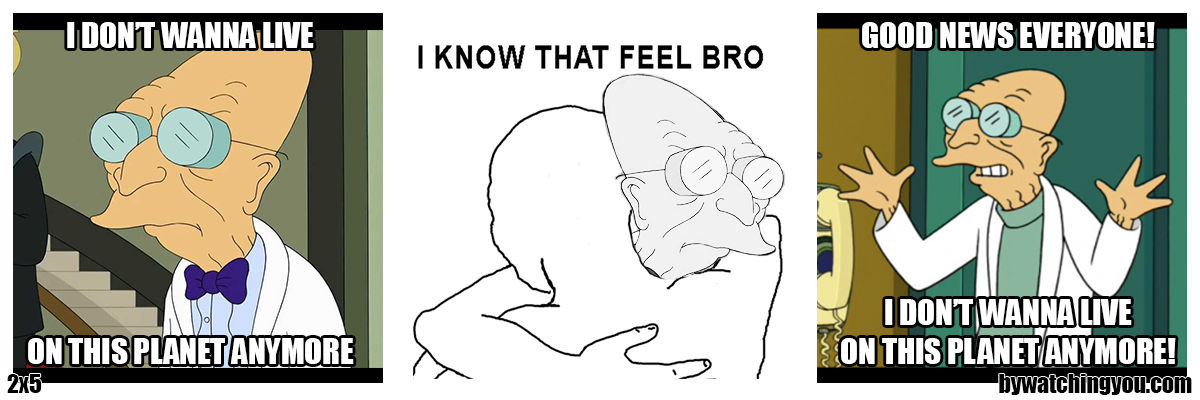
<style>
.page{position:relative;width:1200px;height:400px;background:#ffffff}
.page>*{position:absolute;margin:0}
.t1{font:32.6px "Impact";color:#ffffff}
.t2{font:23.7px "Impact";color:#000000}
</style>
<div class="page">
<p class="t1" style="left:67px;top:22px;width:247px;height:26px">I DON’T WANNA LIVE</p>
<p class="t1" style="left:862px;top:22px;width:293px;height:26px">GOOD NEWS EVERYONE!</p>
<p class="t1" style="left:841px;top:299px;width:335px;height:65px;text-align:center">I DON’T WANNA LIVE<br>ON THIS PLANET ANYMORE!</p>
<p class="t1" style="left:28px;top:338px;width:326px;height:26px">ON THIS PLANET ANYMORE</p>
<p class="t2" style="left:7px;top:374px;width:35px;height:19px">2x5</p>
<p class="t2" style="left:999px;top:374px;width:193px;height:21px">bywatchingyou.com</p>
</div>
